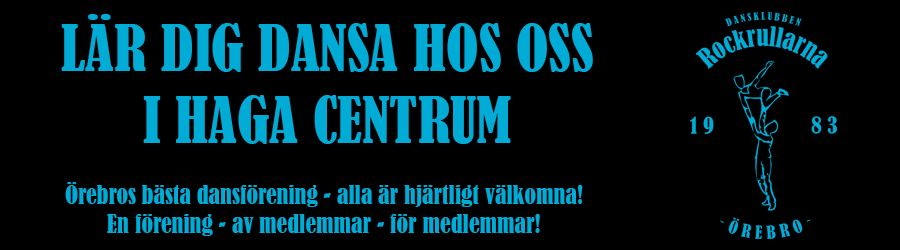
<style>
.page{position:relative;width:900px;height:250px;background:#000000}
.page>*{position:absolute;margin:0}
.t1{font:60px "BernardMT-Condensed";color:#00abd6}
.t2{font:24px "BernardMT-Condensed";color:#00abd6}
</style>
<div class="page">
<p class="t1" style="left:61px;top:14px;width:532px;height:130px;text-align:center">LÄR DIG DANSA HOS OSS <br>I HAGA CENTRUM</p>
<p class="t2" style="left:65px;top:182px;width:518px;height:54px;text-align:center">Örebros bästa dansförening - alla är hjärtligt välkomna! <br>En förening - av medlemmar - för medlemmar!</p>
</div>
